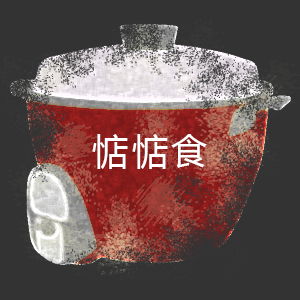
<style>
.page{position:relative;width:300px;height:300px;background:#333333}
.page>*{position:absolute;margin:0}
.t1{font:36px "MicrosoftYaHei";letter-spacing:0.1em;color:#ffffff}
</style>
<div class="page">
<p class="t1" style="left:92px;top:134px;width:115px;height:35px">惦惦食</p>
</div>
